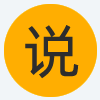
<style>
.page{position:relative;width:100px;height:100px;background:#ffae01}
.page>*{position:absolute;margin:0}
.t1{font:58px "AlibabaPuHuiTi-Regular";color:#2d2d2d}
</style>
<div class="page">
<p class="t1" style="left:25px;top:25px;width:54px;height:54px">说</p>
</div>
